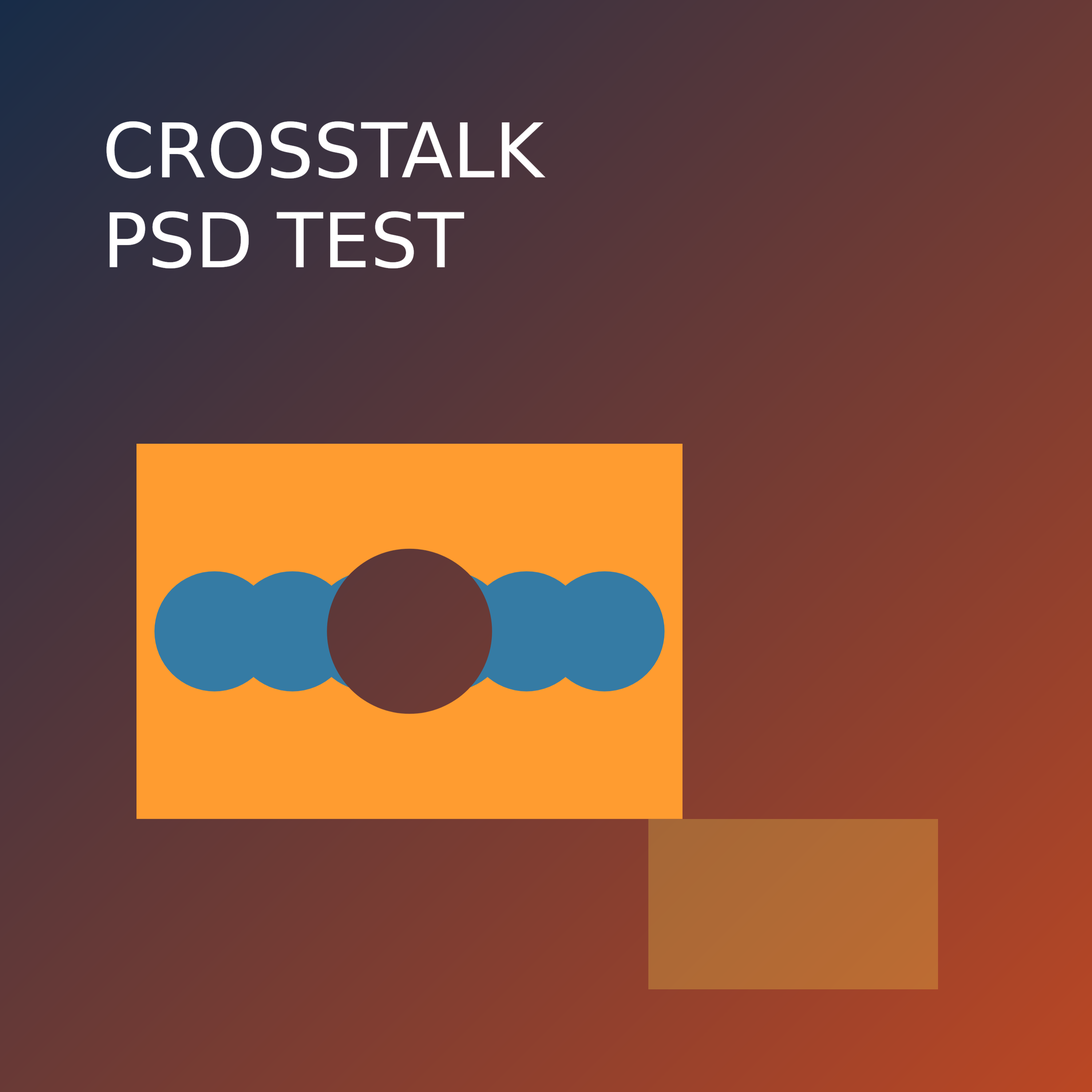
<style>
.page{position:relative;width:1092px;height:1092px}
.page>*{position:absolute;margin:0}
.t1{font:75.1px/90.1px "DejaVuSans";color:#ffffff}
</style>
<div class="page">
<p class="t1" style="left:102px;top:102px;width:853px;height:256px">CROSSTALK<br>PSD TEST</p>
</div>
